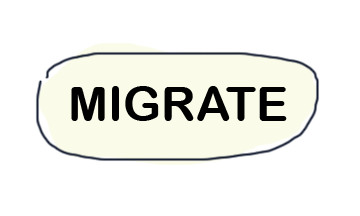
<style>
.page{position:relative;width:360px;height:216px;background:#ffffff}
.page>*{position:absolute;margin:0}
.t1{font:48px "ArialRoundedMTBold";color:#000000}
</style>
<div class="page">
<p class="t1" style="left:71px;top:86px;width:216px;height:35px">MIGRATE</p>
</div>
